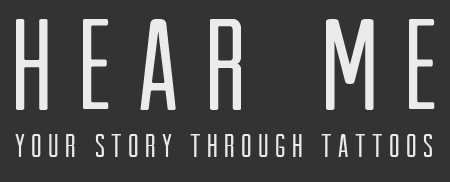
<style>
.page{position:relative;width:450px;height:182px;background:#333333}
.page>*{position:absolute;margin:0}
.t1{font:129.2px "ArvilSans";letter-spacing:0.2em;color:#ebebeb}
.t2{font:32.6px "ArvilSans";letter-spacing:0.2em;color:#ebebeb}
</style>
<div class="page">
<p class="t1" style="left:16px;top:19px;width:419px;height:91px">Hear Me</p>
<p class="t2" style="left:15px;top:134px;width:417px;height:23px">Your Story Through Tattoos</p>
</div>
